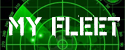
<style>
.page{position:relative;width:125px;height:50px}
.page>*{position:absolute;margin:0}
.t1{font:26.1px "PFStampsPro-Paint";color:#ffffff}
</style>
<div class="page">
<p class="t1" style="left:9px;top:15px;width:111px;height:23px">My fleet</p>
</div>
